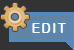
<style>
.page{position:relative;width:74px;height:50px;background:#333333}
.page>*{position:absolute;margin:0}
.t1{font:13.7px "ArialRoundedMTBold";letter-spacing:0.1em;color:#ffffff;scale:0.95 1}
</style>
<div class="page">
<p class="t1" style="left:32px;top:23px;width:34px;height:10px">EDIT</p>
</div>
